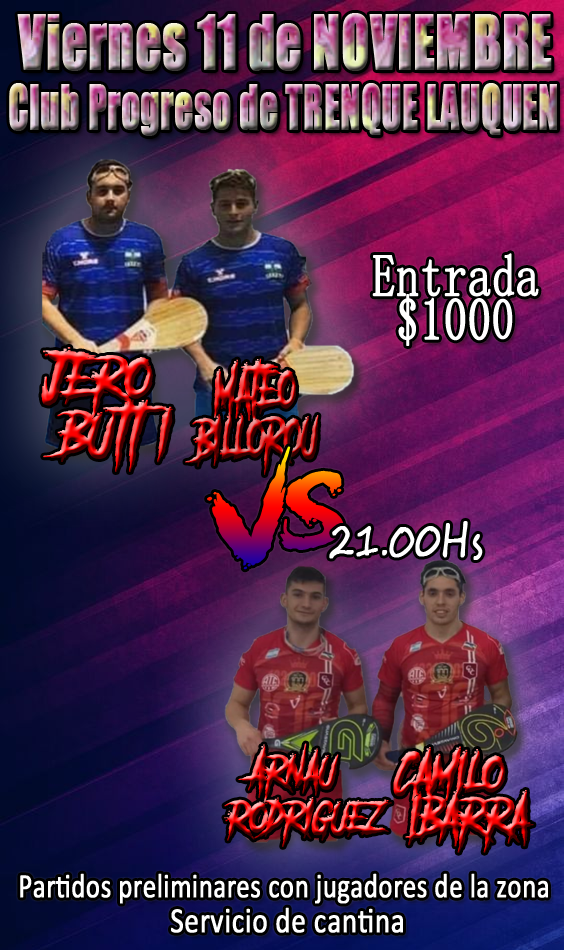
<style>
.page{position:relative;width:564px;height:950px}
.page>*{position:absolute;margin:0}
.t1{font:68.8px "Impact";font-weight:bold;scale:0.73 1}
.t2{font:57.2px "Impact";font-weight:bold;scale:0.64 1}
.t3{font:59.3px/43.6px "SimSun-ExtB";color:#ffffff;font-weight:bold;scale:0.77 1}
.t4{font:56.9px/43.6px "SimSun-ExtB";color:#ffffff;font-weight:bold;scale:0.77 1}
.t5{font:52.4px/7.9px "AnotherDangerDemo";font-weight:bold;scale:0.94 1}
.t6{font:48.5px/7.3px "AnotherDangerDemo";font-weight:bold;scale:0.68 1}
.t7{font:77.5px "AnotherDangerDemo";font-weight:bold;scale:1.54 1}
.t8{font:44.3px "SegoeScript";color:#ffffff;font-weight:bold;scale:0.76 1}
.t9{font:39px/5.8px "AnotherDangerDemo";font-weight:bold;scale:0.85 1}
.t10{font:46.6px/7px "AnotherDangerDemo";font-weight:bold;scale:0.88 1}
.t11{font:34.3px "Calibri";color:#ffffff;font-weight:bold;scale:0.77 1}
.t12{font:35.7px "Calibri";color:#ffffff;font-weight:bold;scale:0.81 1}
</style>
<div class="page">
<p class="t1" style="left:17px;top:13px;width:535px;height:58px">Viernes 11 de NOVIEMBRE</p>
<p class="t2" style="left:9px;top:83px;width:548px;height:53px">Club Progreso de TRENQUE LAUQUEN</p>
<p class="t3" style="left:372px;top:253px;width:167px;height:93px">Entrada<br> $100<span class="t4">0</span></p>
<p class="t5" style="left:41px;top:347px;width:132px;height:125px">Jero <br> Butt i</p>
<p class="t6" style="left:185px;top:358px;width:134px;height:117px;rotate:-2deg">Mateo <br>Billorou</p>
<p class="t7" style="left:207px;top:446px;width:137px;height:124px;rotate:-14deg">VS</p>
<p class="t8" style="left:329px;top:521px;width:154px;height:39px">21.00Hs</p>
<p class="t9" style="left:224px;top:743px;width:168px;height:104px">Arnau <br>Rodriguez</p>
<p class="t10" style="left:393px;top:746px;width:141px;height:107px">Camilo<br> Ibarra</p>
<p class="t11" style="left:20px;top:873px;width:528px;height:31px">Partidos preliminares con jugadores de la zona</p>
<p class="t12" style="left:171px;top:907px;width:232px;height:26px">Servicio de cantina</p>
</div>
